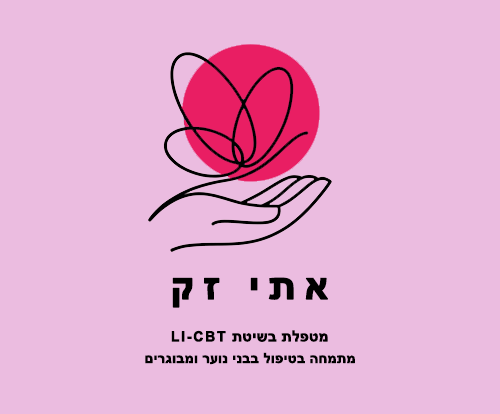
<style>
.page{position:relative;width:500px;height:414px;background:#ebbce0}
.page>*{position:absolute;margin:0}
.t1{font:40px "Arial-BoldMT";letter-spacing:0.2em;color:#000000;font-weight:bold}
.t2{font:15px "Arial-BoldMT";color:#000000;font-weight:bold}
.t3{font:14px "Arial-BoldMT";letter-spacing:0.1em;color:#000000;font-weight:bold}
.t4{font:14px "Arial-BoldMT";color:#000000;font-weight:bold}
</style>
<div class="page">
<p class="t1" style="left:172px;top:277px;width:156px;height:31px">אתי זק</p>
<p class="t2" style="left:171px;top:330px;width:157px;height:12px"><span class="t3">LI-CBT </span>מטפלת בשיטת</p>
<p class="t4" style="left:145px;top:352px;width:210px;height:13px">מתמחה בטיפול בבני נוער ומבוגרים</p>
</div>
